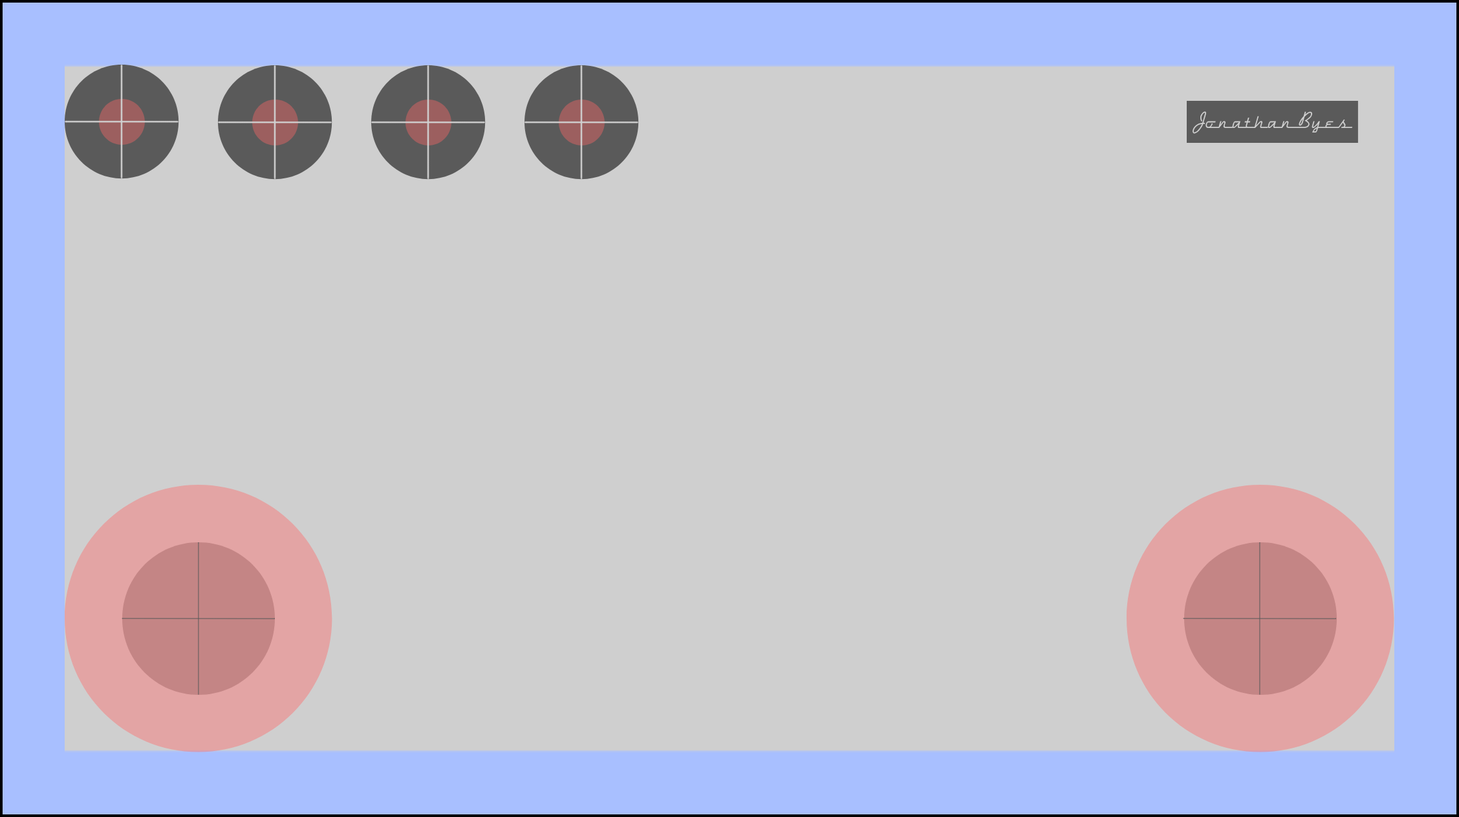
<style>
.page{position:relative;width:1459px;height:817px;background:#cfcfcf}
.page>*{position:absolute;margin:0}
.t1{font:25.2px "DymaxionScript";color:#d0d0d0}
</style>
<div class="page">
<p class="t1" style="left:1192px;top:111px;width:161px;height:23px">JonathanByes</p>
</div>
